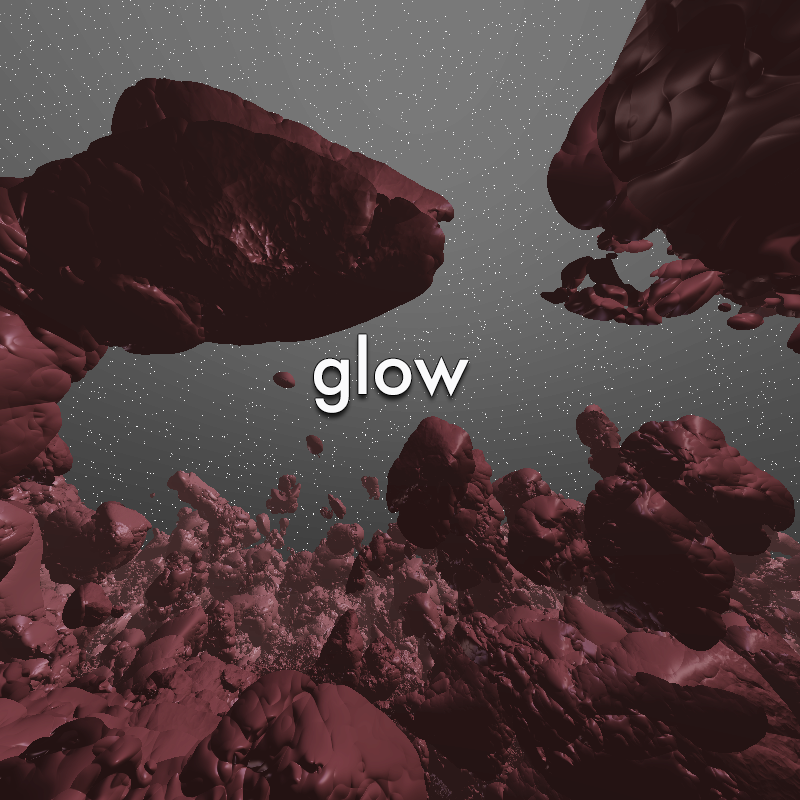
<style>
.page{position:relative;width:800px;height:800px}
.page>*{position:absolute;margin:0}
.t1{font:72px "Futura-Medium";color:#fafafb}
</style>
<div class="page">
<p class="t1" style="left:314px;top:334px;width:155px;height:79px">glow</p>
</div>
